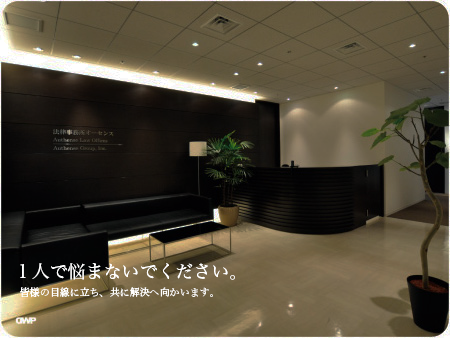
<style>
.page{position:relative;width:450px;height:338px}
.page>*{position:absolute;margin:0}
.t1{font:18px "HiraMinProN-W3";color:#ffffff}
.t2{font:10px "HiraMinProN-W3";color:#ffffff}
</style>
<div class="page">
<p class="t1" style="left:20px;top:263px;width:215px;height:17px">１人で悩まないでください。</p>
<p class="t2" style="left:20px;top:287px;width:193px;height:11px">皆様の目線に立ち、共に解決へ向かいます。</p>
</div>
